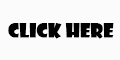
<style>
.page{position:relative;width:120px;height:60px;background:#fcfbfb}
.page>*{position:absolute;margin:0}
.t1{font:18px "ShowcardGothic-Reg";color:#000000;font-weight:bold}
</style>
<div class="page">
<p class="t1" style="left:8px;top:23px;width:106px;height:16px">CLICK HERE</p>
</div>
